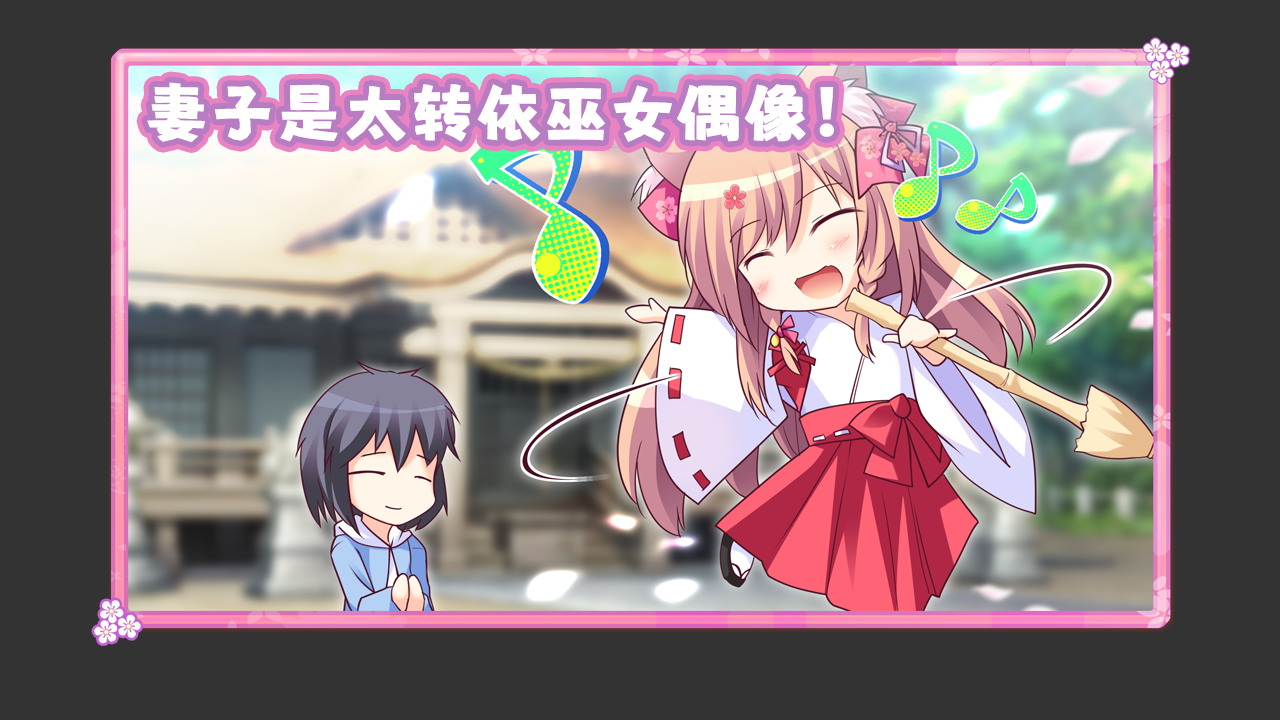
<style>
.page{position:relative;width:1280px;height:720px;background:#333333}
.page>*{position:absolute;margin:0}
.t1{font:65px "MaokenAssortedSans";color:#ffffff;font-weight:bold}
.t2{font:65px "SourceHanSansSC-Bold";color:#ffffff;font-weight:bold}
</style>
<div class="page">
<p class="t1" style="left:147px;top:82px;width:687px;height:61px">妻子是太转依巫女偶像<span class="t2">！</span></p>
</div>
